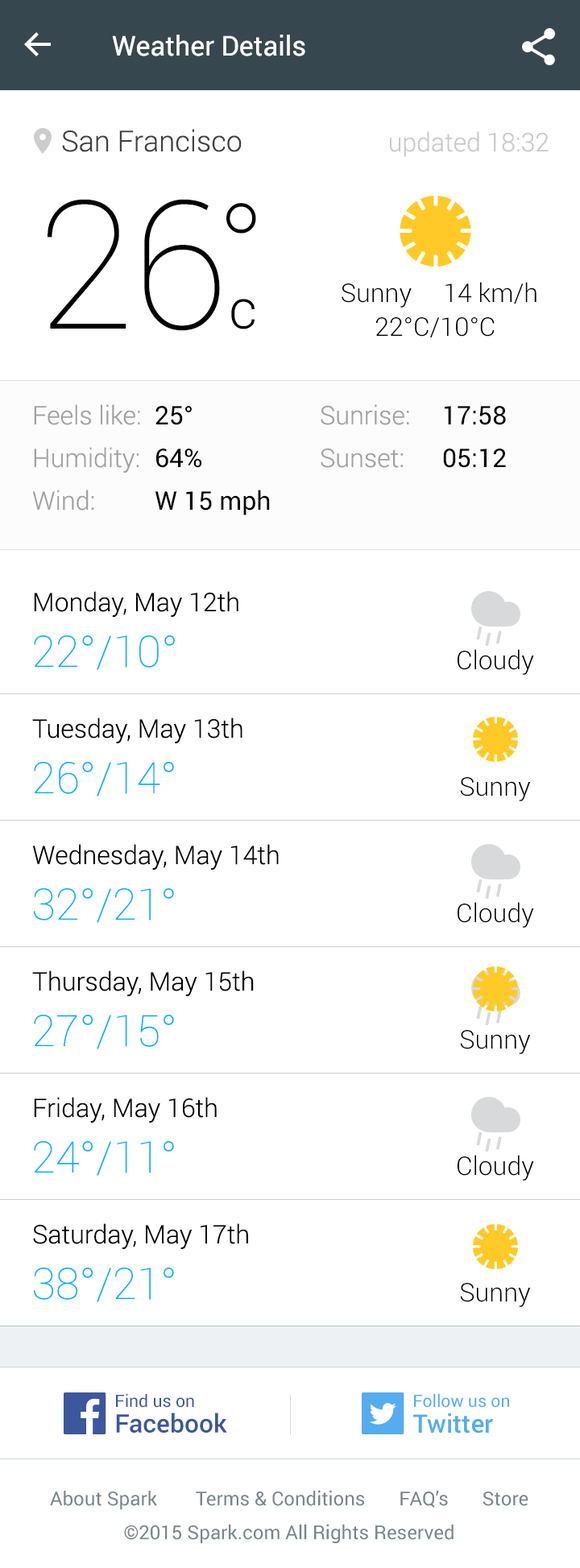
<style>
.page{position:relative;width:580px;height:1568px;background:#ffffff}
.page>*{position:absolute;margin:0}
.t1{font:27.4px "Roboto-Regular";color:#ffffff}
.t2{font:29px "Roboto-Light";color:#404040}
.t3{font:25.8px "Roboto-Light";color:#cacaca}
.t4{font:178.7px "Roboto-Thin";letter-spacing:-0.025em;color:#000000}
.t5{font:128.9px "Roboto-Thin";color:#000000}
.t6{font:25.8px "Roboto-Light";color:#000000}
.t7{font:54.8px "Roboto-Light";color:#000000}
.t8{font:25.8px "Roboto-Light";color:#a1a1a1}
.t9{font:25.8px "Roboto-Regular";color:#000000}
.t10{font:43.5px "Roboto-Thin";color:#00b0ff}
.t11{font:17px "Roboto-Regular";color:#3c579e}
.t12{font:17px "Roboto-Regular";color:#55acee}
.t13{font:25.6px "Roboto-Medium";color:#3c579e}
.t14{font:25.6px "Roboto-Medium";color:#55acee}
.t15{font:19.3px/33.8px "Roboto-Regular";color:#78858b}
</style>
<div class="page">
<p class="t1" style="left:112px;top:35px;width:193px;height:21px">Weather Details</p>
<p class="t2" style="left:62px;top:129px;width:180px;height:23px">San Francisco</p>
<p class="t3" style="left:390px;top:131px;width:158px;height:26px">updated 18:32</p>
<p class="t4" style="left:48px;top:199px;width:172px;height:132px">26</p>
<p class="t5" style="left:226px;top:203px;width:30px;height:31px">°</p>
<p class="t6" style="left:341px;top:282px;width:195px;height:26px">Sunny     14 km/h</p>
<p class="t7" style="left:231px;top:299px;width:23px;height:30px">c</p>
<p class="t6" style="left:376px;top:317px;width:118px;height:20px">22°C/10°C</p>
<p class="t8" style="left:34px;top:404px;width:106px;height:21px">Feels like:</p>
<p class="t9" style="left:155px;top:406px;width:37px;height:19px">25°</p>
<p class="t8" style="left:321px;top:404px;width:88px;height:21px">Sunrise:</p>
<p class="t9" style="left:445px;top:406px;width:61px;height:19px">17:58</p>
<p class="t8" style="left:34px;top:447px;width:105px;height:26px">Humidity:</p>
<p class="t9" style="left:156px;top:449px;width:45px;height:19px">64%</p>
<p class="t8" style="left:321px;top:448px;width:82px;height:20px">Sunset:</p>
<p class="t9" style="left:443px;top:449px;width:63px;height:19px">05:12</p>
<p class="t8" style="left:32px;top:490px;width:62px;height:21px">Wind:</p>
<p class="t9" style="left:155px;top:490px;width:115px;height:25px">W 15 mph</p>
<p class="t6" style="left:34px;top:591px;width:204px;height:26px">Monday, May 12th</p>
<p class="t10" style="left:34px;top:635px;width:141px;height:35px">22°/10°</p>
<p class="t6" style="left:457px;top:649px;width:77px;height:26px">Cloudy</p>
<p class="t6" style="left:32px;top:718px;width:210px;height:25px">Tuesday, May 13th</p>
<p class="t10" style="left:34px;top:762px;width:140px;height:34px">26°/14°</p>
<p class="t6" style="left:460px;top:777px;width:71px;height:24px">Sunny</p>
<p class="t6" style="left:32px;top:844px;width:247px;height:26px">Wednesday, May 14th</p>
<p class="t10" style="left:34px;top:888px;width:140px;height:35px">32°/21°</p>
<p class="t6" style="left:457px;top:902px;width:77px;height:26px">Cloudy</p>
<p class="t6" style="left:32px;top:970px;width:222px;height:26px">Thursday, May 15th</p>
<p class="t10" style="left:34px;top:1015px;width:140px;height:34px">27°/15°</p>
<p class="t6" style="left:460px;top:1030px;width:71px;height:24px">Sunny</p>
<p class="t6" style="left:34px;top:1097px;width:183px;height:26px">Friday, May 16th</p>
<p class="t10" style="left:34px;top:1141px;width:140px;height:35px">24°/11°</p>
<p class="t6" style="left:457px;top:1155px;width:77px;height:26px">Cloudy</p>
<p class="t6" style="left:33px;top:1223px;width:215px;height:26px">Saturday, May 17th</p>
<p class="t10" style="left:34px;top:1268px;width:140px;height:34px">38°/21°</p>
<p class="t6" style="left:460px;top:1283px;width:71px;height:24px">Sunny</p>
<p class="t11" style="left:116px;top:1393px;width:78px;height:15px">Find us on</p>
<p class="t12" style="left:414px;top:1393px;width:95px;height:15px">Follow us on</p>
<p class="t13" style="left:116px;top:1413px;width:111px;height:20px">Facebook</p>
<p class="t14" style="left:413px;top:1413px;width:80px;height:21px">Twitter</p>
<p class="t15" style="left:50px;top:1490px;width:478px;height:54px;text-align:center">About Spark        Terms &amp; Conditions       FAQ’s       Store<br>©2015 Spark.com All Rights Reserved</p>
</div>
